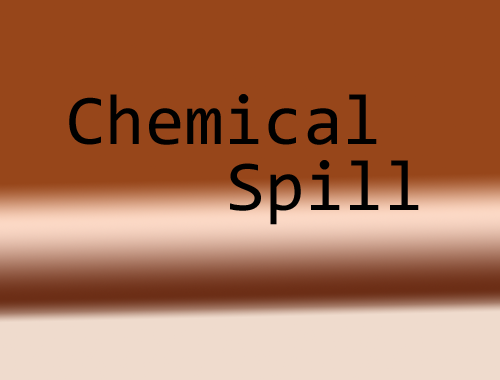
<style>
.page{position:relative;width:500px;height:380px;background:#97461a}
.page>*{position:absolute;margin:0}
.t1{font:71.7px "Consolas";color:#000000}
</style>
<div class="page">
<p class="t1" style="left:69px;top:94px;width:308px;height:51px">Chemical</p>
<p class="t1" style="left:230px;top:160px;width:189px;height:65px">Spill</p>
</div>
